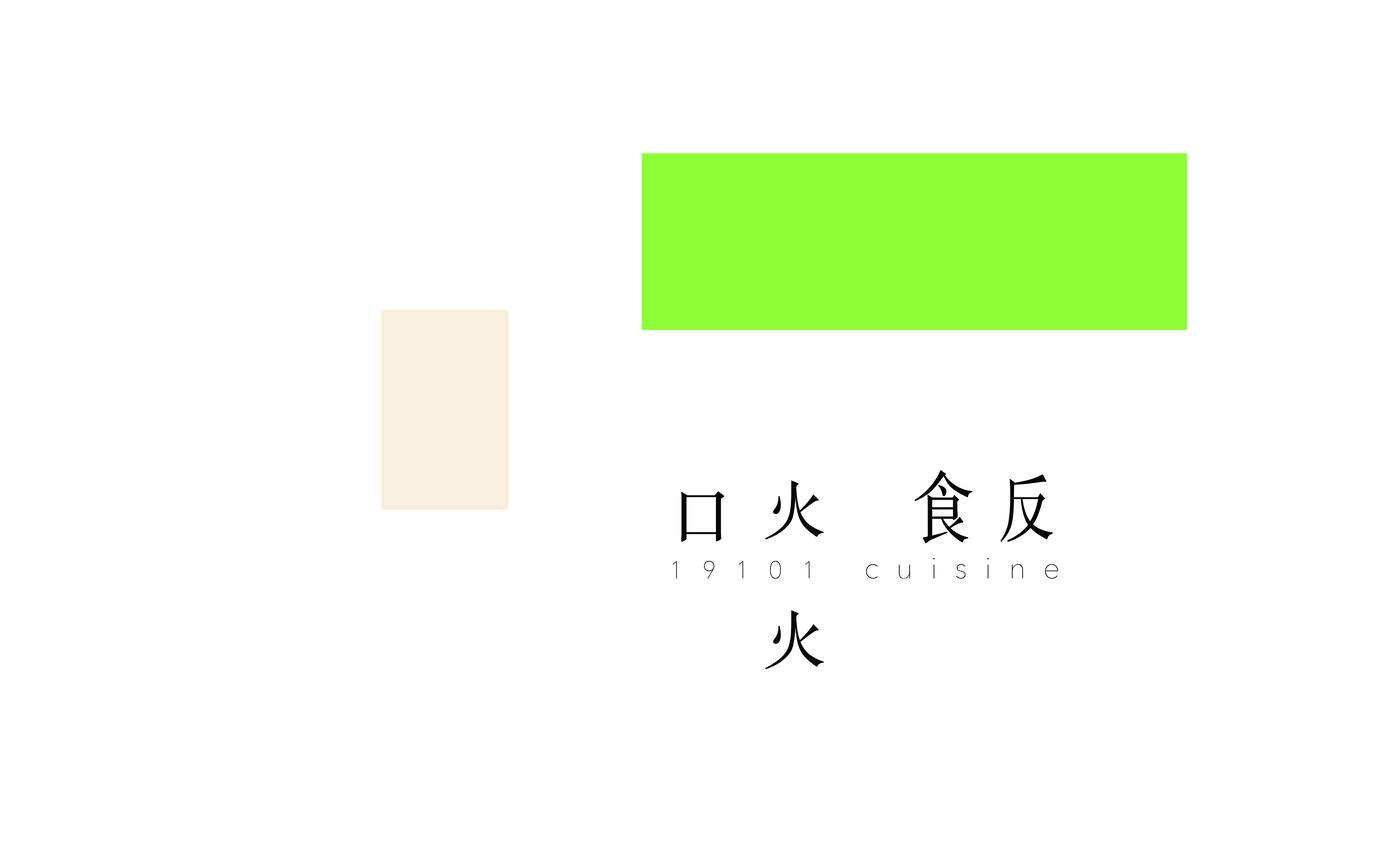
<style>
.page{position:relative;width:1399px;height:852px;background:#ffffff}
.page>*{position:absolute;margin:0}
.t1{font:77.4px "STSongti-TC-Regular";letter-spacing:0.836em;color:#040707;scale:0.8 1}
.t2{font:64.4px "STSongti-TC-Regular";letter-spacing:0.836em;color:#040707}
.t3{font:75.1px "STSongti-TC-Regular";letter-spacing:0.836em;color:#040707;scale:0.74 1}
.t4{font:29.5px "AvenirNext-UltraLight";letter-spacing:0.596em;color:#040707}
.t5{font:24.2px "AvenirNext-UltraLight";letter-spacing:0.816em;color:#040707}
</style>
<div class="page">
<p class="t1" style="left:915px;top:470px;width:58px;height:74px">食</p>
<p class="t2" style="left:765px;top:480px;width:59px;height:59px">火</p>
<p class="t3" style="left:1001px;top:474px;width:52px;height:68px">反</p>
<p class="t2" style="left:681px;top:491px;width:44px;height:51px">口</p>
<p class="t4" style="left:673px;top:558px;width:385px;height:21px"><span class="t5">19101 </span>cuisine</p>
<p class="t2" style="left:765px;top:610px;width:59px;height:59px">火</p>
</div>
